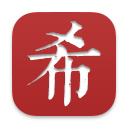
<style>
.page{position:relative;width:128px;height:128px;background:#ffffff}
.page>*{position:absolute;margin:0}
.t1{font:80px "TpldKhangXiDictDemo";color:#ffffff}
</style>
<div class="page">
<p class="t1" style="left:27px;top:21px;width:74px;height:86px">希</p>
</div>
